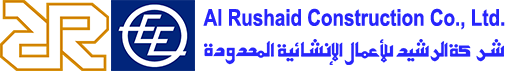
<style>
.page{position:relative;width:507px;height:71px;background:#ffffff}
.page>*{position:absolute;margin:0}
.t1{font:23px "ArialNarrow-Bold";color:#2725fc}
</style>
<div class="page">
<p class="t1" style="left:203px;top:8px;width:302px;height:22px">Al Rushaid Construction Co., Ltd.</p>
</div>
